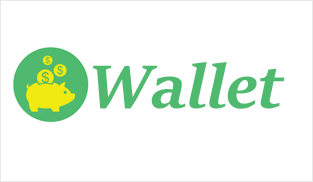
<style>
.page{position:relative;width:313px;height:182px;background:#ffffff}
.page>*{position:absolute;margin:0}
.t1{font:68px "SitkaHeading-BoldItalic";color:#4fba6f}
</style>
<div class="page">
<p class="t1" style="left:93px;top:62px;width:192px;height:47px">Wallet</p>
</div>
